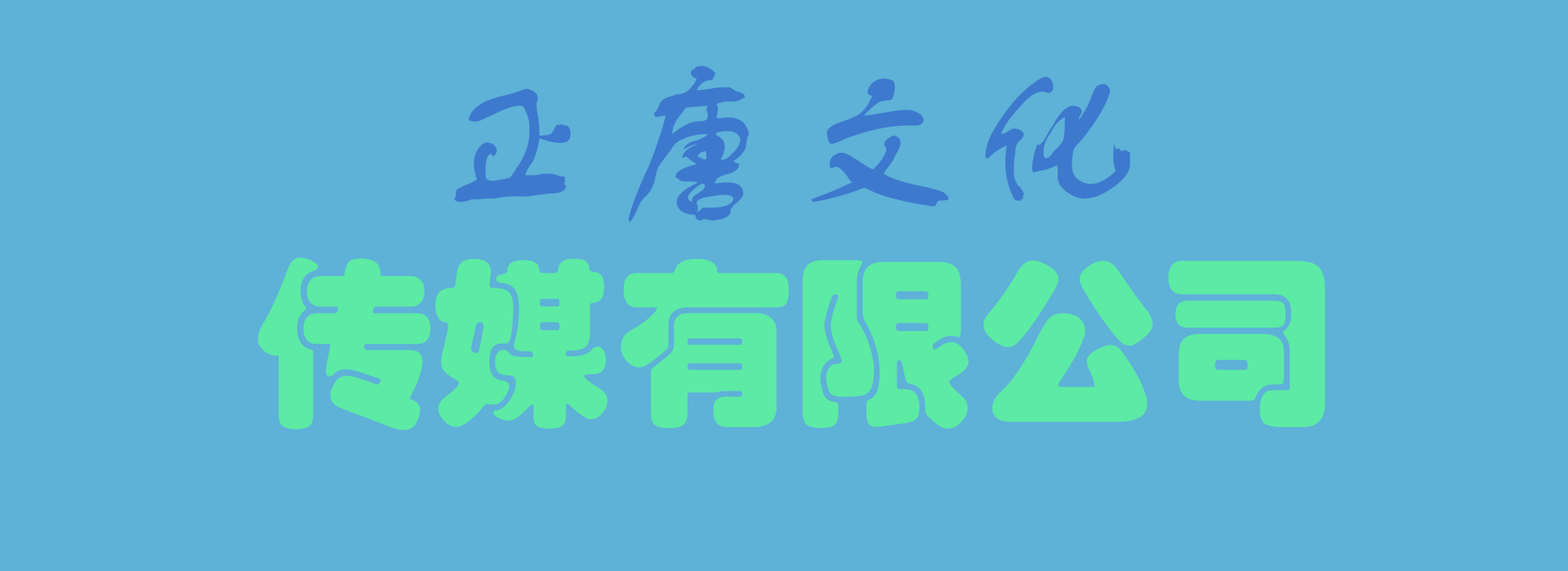
<style>
.page{position:relative;width:1568px;height:571px;background:#5eb1d7}
.page>*{position:absolute;margin:0}
.t1{font:181.3px "FZSTK--GBK1-0";color:#3d7ace}
.t2{font:181.3px "STHupo";color:#5ceaa5}
</style>
<div class="page">
<p class="t1" style="left:454px;top:65px;width:676px;height:157px">正唐文化</p>
<p class="t2" style="left:257px;top:257px;width:1068px;height:173px">传媒有限公司</p>
</div>
